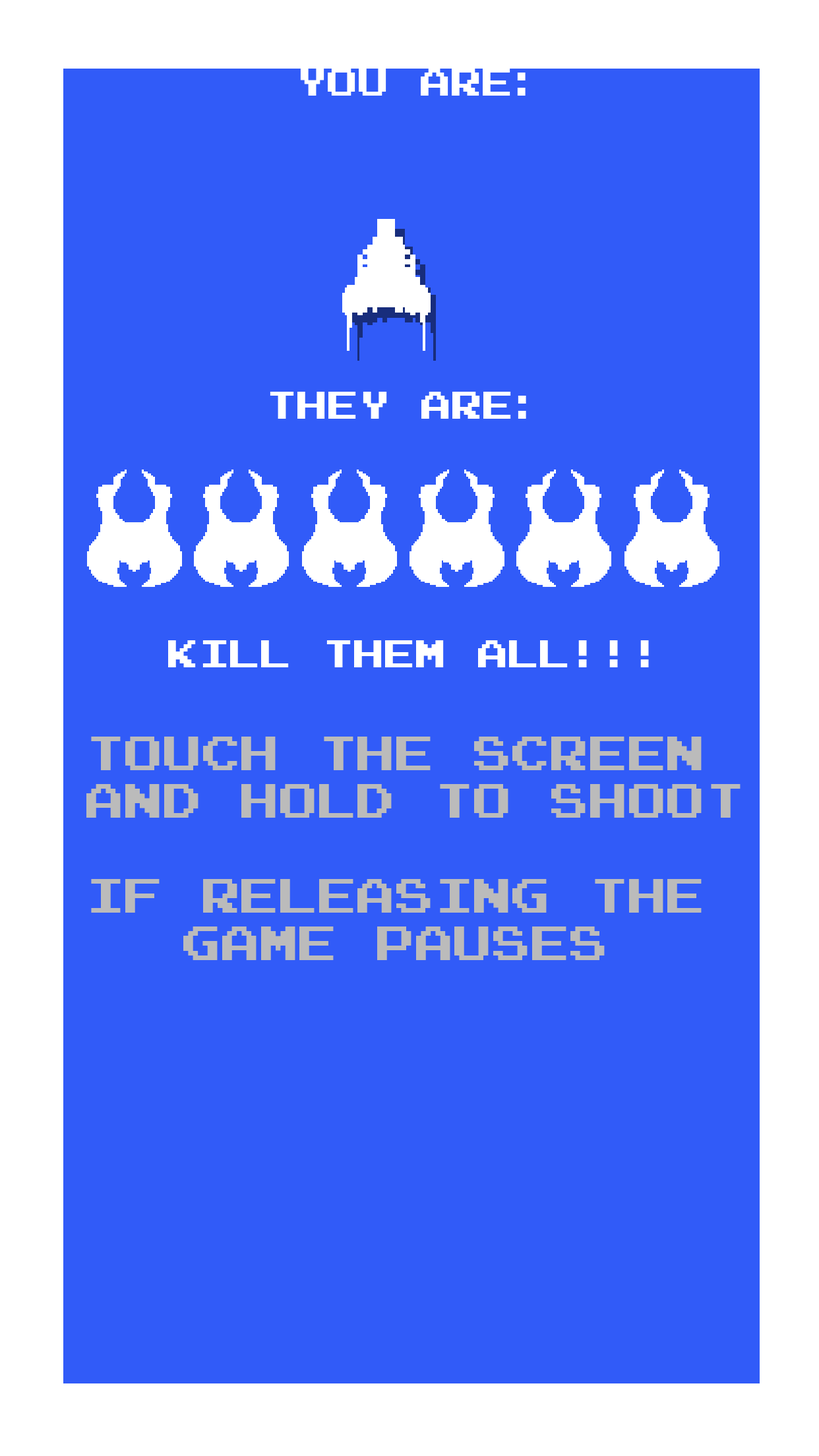
<style>
.page{position:relative;width:819px;height:1456px;background:#315bf8}
.page>*{position:absolute;margin:0}
.t1{font:31.7px "ArcadeNormal";color:#ffffff}
.t2{font:39.6px "ArcadeNormal";color:#bbbbbb}
.t3{font:39.6px "ArcadeNormal";color:#ffffff}
</style>
<div class="page">
<p class="t1" style="left:300px;top:69px;width:226px;height:27px">YOU ARE:</p>
<p class="t1" style="left:270px;top:392px;width:256px;height:27px">THEY ARE:</p>
<p class="t1" style="left:168px;top:640px;width:481px;height:27px">KILL THEM ALL!!!</p>
<p class="t2" style="left:86px;top:737px;width:655px;height:223px;text-align:center"><span class="t3"><br></span>touch the screen<br> and hold to shoot<br><br>if releasing the<br>game pauses</p>
</div>
